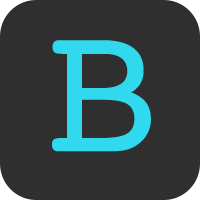
<style>
.page{position:relative;width:200px;height:200px;background:#2f2f2f}
.page>*{position:absolute;margin:0}
.t1{font:191.6px "Courier";color:#30d9ed}
</style>
<div class="page">
<p class="t1" style="left:52px;top:40px;width:99px;height:112px">B</p>
</div>
